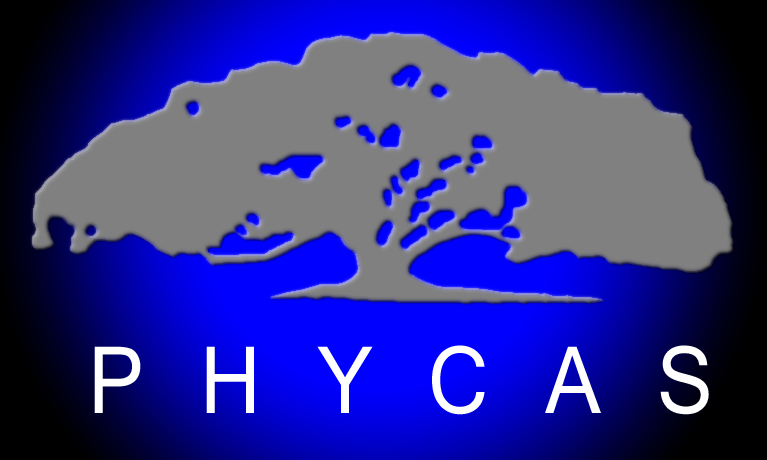
<style>
.page{position:relative;width:767px;height:460px;background:#808080}
.page>*{position:absolute;margin:0}
.t1{font:92.4px "MicrosoftSansSerif";letter-spacing:0.2em;color:#ffffff;scale:0.91 1}
</style>
<div class="page">
<p class="t1" style="left:94px;top:345px;width:615px;height:70px">P H Y C A S</p>
</div>
